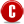
<style>
.page{position:relative;width:24px;height:24px;background:#ffffff}
.page>*{position:absolute;margin:0}
.t1{font:18px "Haettenschweiler";color:#ffffff}
</style>
<div class="page">
<p class="t1" style="left:9px;top:4px;width:7px;height:14px">C</p>
</div>
